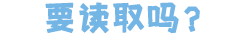
<style>
.page{position:relative;width:246px;height:35px;background:#ffffff}
.page>*{position:absolute;margin:0}
.t1{font:33.7px "shetumodengxiaofangti";color:#73b5e4;font-weight:bold}
</style>
<div class="page">
<p class="t1" style="left:45px;top:2px;width:155px;height:32px">要读取吗？</p>
</div>
